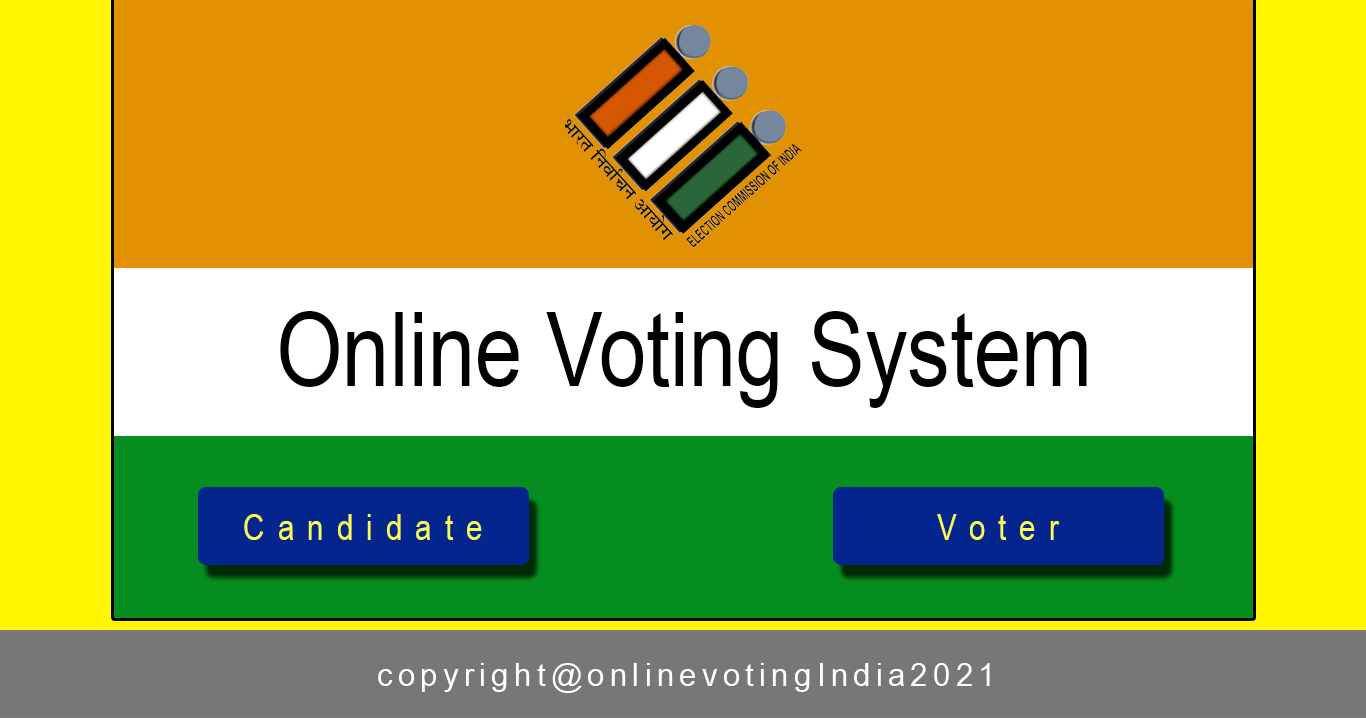
<style>
.page{position:relative;width:1366px;height:718px;background:#e29103}
.page>*{position:absolute;margin:0}
.t1{font:104.2px "ArialNarrow";color:#000000}
.t2{font:36px "ArialNarrow";letter-spacing:0.365em;color:#f9ff4d}
.t3{font:31.9px "ArialNarrow";letter-spacing:0.145em;color:#ffffff;scale:1.18 1}
</style>
<div class="page">
<p class="t1" style="left:280px;top:311px;width:807px;height:97px">Online Voting System</p>
<p class="t2" style="left:244px;top:514px;width:238px;height:26px">Candidate</p>
<p class="t2" style="left:937px;top:514px;width:123px;height:26px">Voter</p>
<p class="t3" style="left:378px;top:663px;width:612px;height:30px">copyright@onlinevotingIndia2021</p>
</div>
